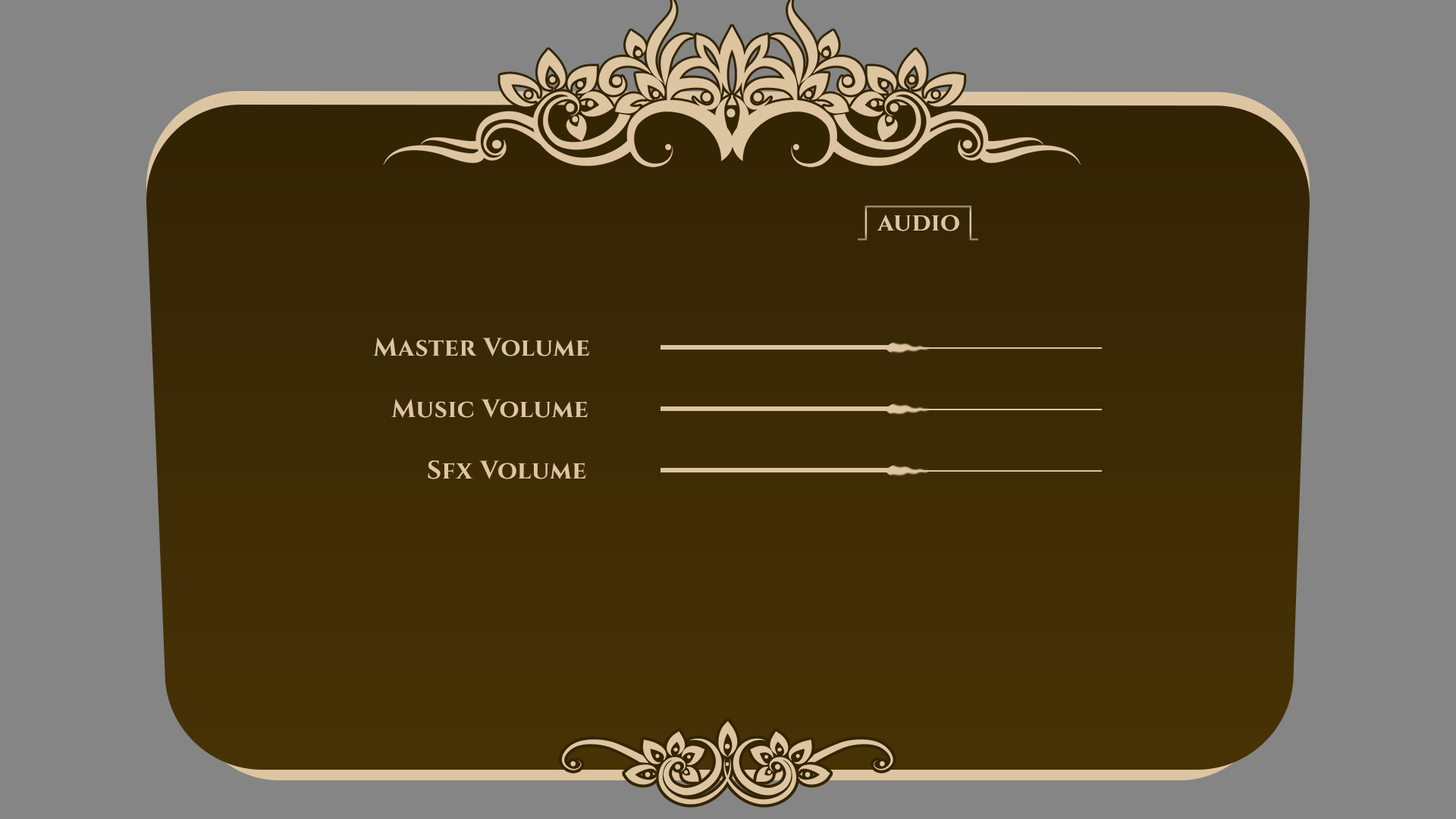
<style>
.page{position:relative;width:1456px;height:819px;background:#858585}
.page>*{position:absolute;margin:0}
.t1{font:25.2px "CinzelRoman-Bold";letter-spacing:0.025em;color:#ddc5a1}
</style>
<div class="page">
<p class="t1" style="left:877px;top:215px;width:82px;height:16px">audio</p>
<p class="t1" style="left:877px;top:215px;width:82px;height:16px">audio</p>
<p class="t1" style="left:373px;top:337px;width:216px;height:19px">Master Volume</p>
<p class="t1" style="left:391px;top:399px;width:197px;height:19px">Music Volume</p>
<p class="t1" style="left:428px;top:460px;width:158px;height:19px">Sfx Volume</p>
</div>
